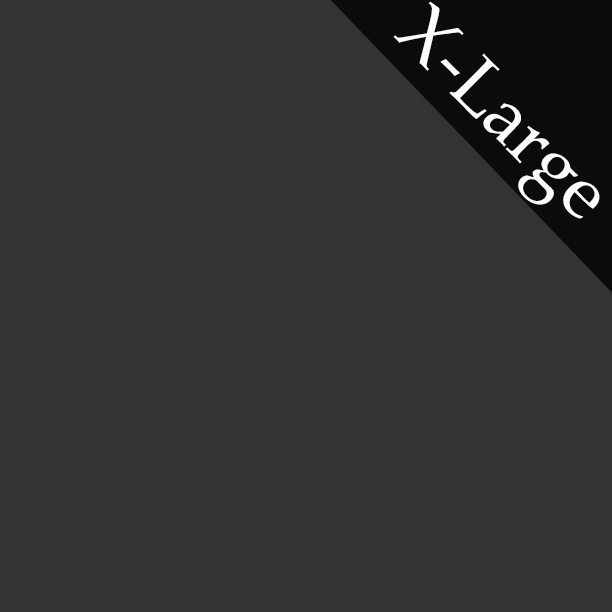
<style>
.page{position:relative;width:612px;height:612px;background:#333333}
.page>*{position:absolute;margin:0}
.t1{font:75px "BookAntiqua";color:#ffffff}
</style>
<div class="page">
<p class="t1" style="left:393px;top:1px;width:207px;height:218px;rotate:45deg">X-Large</p>
</div>
